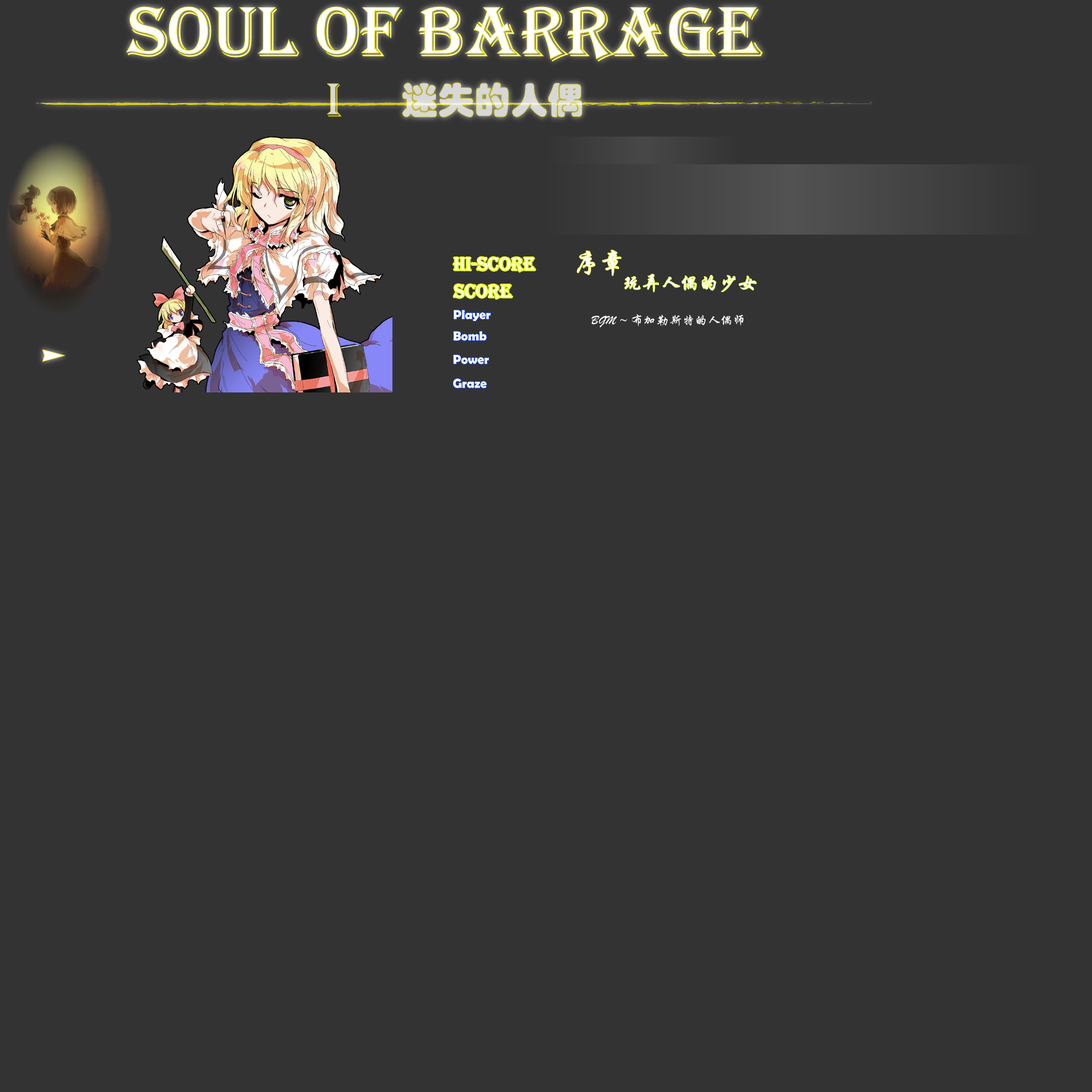
<style>
.page{position:relative;width:1092px;height:1092px;background:#333333}
.page>*{position:absolute;margin:0}
.t1{font:19.2px "Algerian";color:#ffffff}
.t2{font:25.6px "STXingkai";color:#ffffff}
.t3{font:19.2px "STXingkai";color:#ffffff}
.t4{font:12.8px "BerlinSansFBDemi-Bold";color:#ffffff}
.t5{font:12.8px "STXingkai";color:#ffffff}
</style>
<div class="page">
<p class="t1" style="left:453px;top:257px;width:82px;height:15px">Hi-Score</p>
<p class="t2" style="left:577px;top:250px;width:44px;height:26px">序章</p>
<p class="t3" style="left:624px;top:274px;width:133px;height:18px">玩弄人偶的少女</p>
<p class="t1" style="left:454px;top:284px;width:58px;height:15px">Score</p>
<p class="t4" style="left:454px;top:310px;width:37px;height:11px">Player</p>
<p class="t5" style="left:591px;top:314px;width:153px;height:13px">BGM ~ 布加勒斯特的人偶师</p>
<p class="t4" style="left:453px;top:331px;width:34px;height:10px">Bomb</p>
<p class="t4" style="left:453px;top:355px;width:36px;height:9px">Power</p>
<p class="t4" style="left:453px;top:379px;width:34px;height:9px">Graze</p>
</div>
